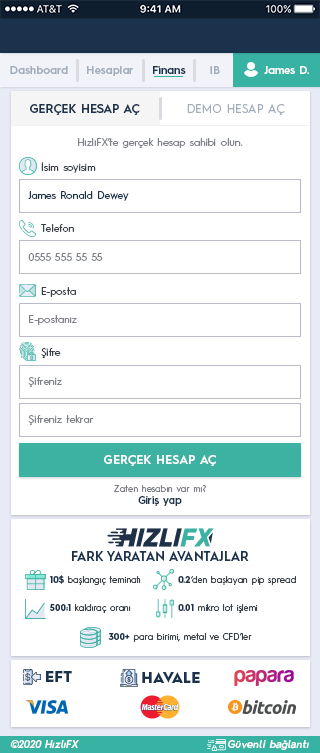
<style>
.page{position:relative;width:320px;height:753px;background:#ffffff}
.page>*{position:absolute;margin:0}
.t1{font:11.1px "HurmeGeometricSans3-SemiBold";color:#a1adbb}
.t2{font:11.1px "HurmeGeometricSans3-SemiBold";color:#1a324c}
.t3{font:11.1px "HurmeGeometricSans3-SemiBold";color:#fefefe}
.t4{font:11.9px "HurmeGeometricSans1-SemiBold";letter-spacing:0.01em;color:#1a324c}
.t5{font:11.9px "HurmeGeometricSans1-Regular";letter-spacing:0.01em;color:#a1adbb}
.t6{font:10.2px "HurmeGeometricSans1-Regular";letter-spacing:0.01em;color:#7f8389}
.t7{font:10.2px "HurmeGeometricSans1-Regular";letter-spacing:0.01em;color:#3a4149}
.t8{font:10.2px "HurmeGeometricSans1-Regular";letter-spacing:0.01em;color:#1a324c}
.t9{font:11.9px "HurmeGeometricSans1-SemiBold";letter-spacing:0.025em;color:#ffffff}
.t10{font:9px "HurmeGeometricSans1-Regular";letter-spacing:0.01em;color:#7f8389}
.t11{font:10.2px "HurmeGeometricSans3-SemiBold";letter-spacing:0.025em;color:#1a324c}
.t12{font:12.8px "HurmeGeometricSans1-SemiBold";color:#1a324c}
.t13{font:9px "HurmeGeometricSans1-Regular";color:#3a4149}
.t14{font:9px "HurmeGeometricSans1-Bold";color:#1a324c}
.t15{font:14.5px "HurmeGeometricSans1-Black";letter-spacing:0.025em;color:#1a324c}
.t16{font:10.2px "HurmeGeometricSans2-SemiBoldObl";letter-spacing:0.025em;color:#ffffff}
</style>
<div class="page">
<p class="t1" style="left:10px;top:66px;width:58px;height:8px">Dashboard</p>
<p class="t1" style="left:87px;top:66px;width:46px;height:10px">Hesaplar</p>
<p class="t2" style="left:153px;top:66px;width:33px;height:8px">Finans</p>
<p class="t1" style="left:210px;top:66px;width:10px;height:8px">IB</p>
<p class="t3" style="left:264px;top:66px;width:45px;height:8px">James D.</p>
<p class="t4" style="left:30px;top:104px;width:110px;height:11px">GERÇEK HESAP AÇ</p>
<p class="t5" style="left:187px;top:104px;width:98px;height:11px">DEMO HESAP AÇ</p>
<p class="t6" style="left:78px;top:138px;width:165px;height:10px">HızlıFX’te gerçek hesap sahibi olun.</p>
<p class="t7" style="left:41px;top:162px;width:55px;height:11px">İsim soyisim</p>
<p class="t8" style="left:28px;top:191px;width:101px;height:10px">James Ronald Dewey</p>
<p class="t7" style="left:41px;top:224px;width:33px;height:8px">Telefon</p>
<p class="t6" style="left:28px;top:253px;width:75px;height:8px">0555 555 55 55</p>
<p class="t7" style="left:41px;top:287px;width:35px;height:10px">E-posta</p>
<p class="t6" style="left:29px;top:315px;width:48px;height:10px">E-postanız</p>
<p class="t7" style="left:41px;top:348px;width:20px;height:10px">Şifre</p>
<p class="t6" style="left:28px;top:377px;width:34px;height:10px">Şifreniz</p>
<p class="t6" style="left:28px;top:415px;width:66px;height:10px">Şifreniz tekrar</p>
<p class="t9" style="left:104px;top:455px;width:112px;height:11px">GERÇEK HESAP AÇ</p>
<p class="t10" style="left:114px;top:485px;width:92px;height:7px">Zaten hesabın var mı?</p>
<p class="t11" style="left:138px;top:496px;width:44px;height:10px">Giriş yap</p>
<p class="t12" style="left:72px;top:551px;width:177px;height:10px">FARK YARATAN AVANTAJLAR</p>
<p class="t13" style="left:50px;top:575px;width:91px;height:10px"><span class="t14">10$</span> başlangıç teminatı</p>
<p class="t13" style="left:178px;top:576px;width:118px;height:9px"><span class="t14">0.2</span>‘den başlayan pip spread</p>
<p class="t13" style="left:49px;top:604px;width:82px;height:9px"><span class="t14">500:1</span> kaldıraç oranı</p>
<p class="t13" style="left:178px;top:604px;width:80px;height:9px"><span class="t14">0.01</span> mikro lot işlemi</p>
<p class="t13" style="left:108px;top:633px;width:144px;height:9px"><span class="t14">300+</span> para birimi, metal ve CFD’ler</p>
<p class="t15" style="left:46px;top:671px;width:26px;height:11px">EFT</p>
<p class="t15" style="left:142px;top:672px;width:58px;height:11px">HAVALE</p>
<p class="t16" style="left:10px;top:740px;width:69px;height:8px">©2020 HızlıFX</p>
<p class="t16" style="left:228px;top:740px;width:81px;height:10px">Güvenli bağlantı</p>
</div>
